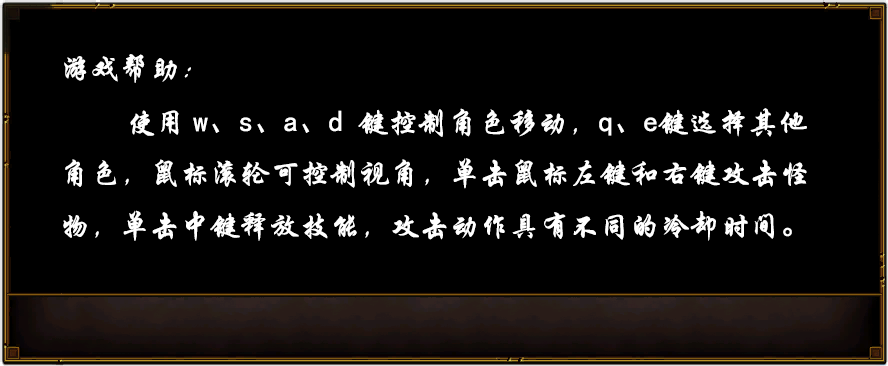
<style>
.page{position:relative;width:888px;height:366px;background:#000000}
.page>*{position:absolute;margin:0}
.t1{font:30px "STXingkai";color:#ffffff}
.t2{font:30px "SimHei";color:#ffffff}
</style>
<div class="page">
<p class="t1" style="left:63px;top:54px;width:744px;height:187px">游戏帮助：<br>         使用 <span class="t2">w、s、a、d </span>键控制角色移动，<span class="t2">q、e</span>键选择其他角色，鼠标滚轮可控制视角，单击鼠标左键和右键攻击怪物，单击中键释放技能，攻击动作具有不同的冷却时间。</p>
</div>
